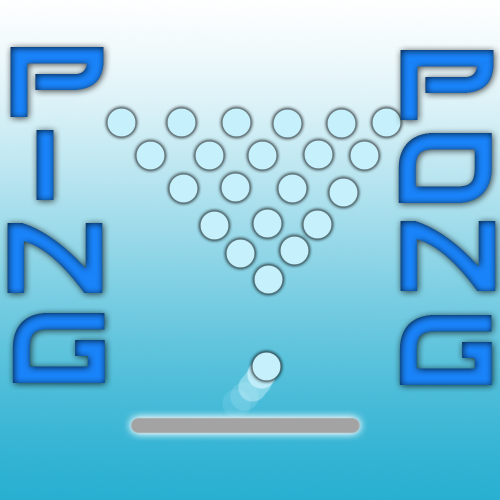
<style>
.page{position:relative;width:500px;height:500px}
.page>*{position:absolute;margin:0}
.t1{font:100px "Xirod-Regular"}
</style>
<div class="page">
<p class="t1" style="left:10px;top:47px;width:94px;height:70px">p</p>
<p class="t1" style="left:400px;top:50px;width:94px;height:70px">p</p>
<p class="t1" style="left:36px;top:130px;width:18px;height:70px">i</p>
<p class="t1" style="left:398px;top:133px;width:94px;height:70px">o</p>
<p class="t1" style="left:400px;top:221px;width:96px;height:70px">n</p>
<p class="t1" style="left:7px;top:223px;width:96px;height:70px">n</p>
<p class="t1" style="left:12px;top:313px;width:93px;height:70px">g</p>
<p class="t1" style="left:399px;top:315px;width:93px;height:70px">g</p>
</div>
